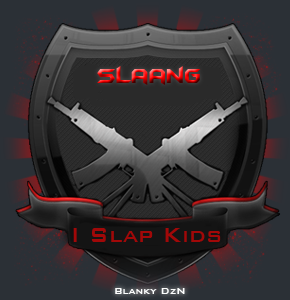
<style>
.page{position:relative;width:290px;height:300px;background:#2b3036}
.page>*{position:absolute;margin:0}
.t1{font:24px "BatmanForeverAlternate";scale:0.9 1}
.t2{font:27px "BankGothicBT-Medium";color:#a10808;scale:0.9 1}
.t3{font:12px "BankGothicBT-Medium";color:#fdfefe;scale:0.9 1}
</style>
<div class="page">
<p class="t1" style="left:97px;top:66px;width:104px;height:19px">SLaanG</p>
<p class="t2" style="left:73px;top:228px;width:148px;height:14px">I Slap Kids</p>
<p class="t3" style="left:115px;top:288px;width:70px;height:6px">Blanky DzN</p>
</div>
